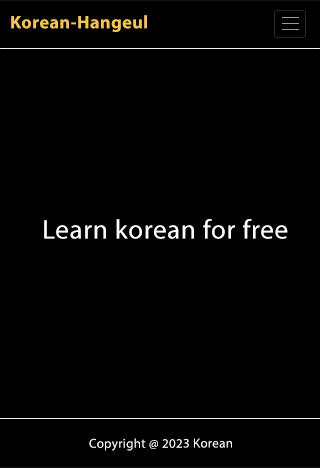
<style>
.page{position:relative;width:320px;height:468px;background:#000000}
.page>*{position:absolute;margin:0}
.t1{font:18.2px "MyriadPro-Bold";letter-spacing:0.025em;color:#f7c744}
.t2{font:27px "MyriadPro-Regular";letter-spacing:0.025em;color:#ffffff}
.t3{font:13px "MyriadPro-Regular";letter-spacing:0.025em;color:#ffffff}
</style>
<div class="page">
<p class="t1" style="left:11px;top:15px;width:136px;height:17px">Korean-Hangeul</p>
<p class="t2" style="left:44px;top:219px;width:244px;height:20px">Learn korean for free</p>
<p class="t3" style="left:89px;top:438px;width:143px;height:13px">Copyright @ 2023 Korean</p>
</div>
